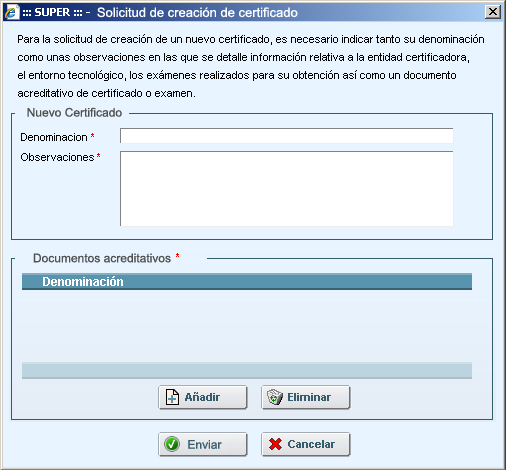
<style>
.page{position:relative;width:506px;height:470px;background:#e8f4ff}
.page>*{position:absolute;margin:0}
.t1{font:11px/18px "ArialMT";color:#000000}
.t2{font:12px "ArialMT";color:#505050}
</style>
<div class="page">
<p class="t1" style="left:18px;top:34px;width:466px;height:63px">Para la solicitud de creación de un nuevo certificado, es necesario indicar tanto su denominación<br>como unas observaciones en las que se detalle información relativa a la entidad certificadora, <br>el entorno tecnológico, los exámenes realizados para su obtención así como un documento<br>acreditativo de certificado o examen.</p>
<p class="t2" style="left:27px;top:107px;width:95px;height:10px">Nuevo Certificado</p>
<p class="t2" style="left:33px;top:253px;width:138px;height:10px">Documentos acreditativos</p>
</div>
